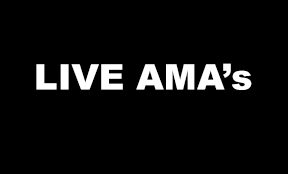
<style>
.page{position:relative;width:288px;height:174px;background:#000000}
.page>*{position:absolute;margin:0}
.t1{font:35.3px "Arial-Black";color:#ffffff}
</style>
<div class="page">
<p class="t1" style="left:36px;top:63px;width:216px;height:27px">LIVE AMA’s</p>
</div>
